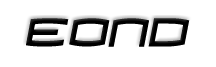
<style>
.page{position:relative;width:216px;height:67px;background:#ffffff}
.page>*{position:absolute;margin:0}
.t1{font:55px "Homoarakhn";letter-spacing:-0.1em;color:#000000;scale:0.91 1}
</style>
<div class="page">
<p class="t1" style="left:26px;top:18px;width:164px;height:29px">Eond</p>
</div>
